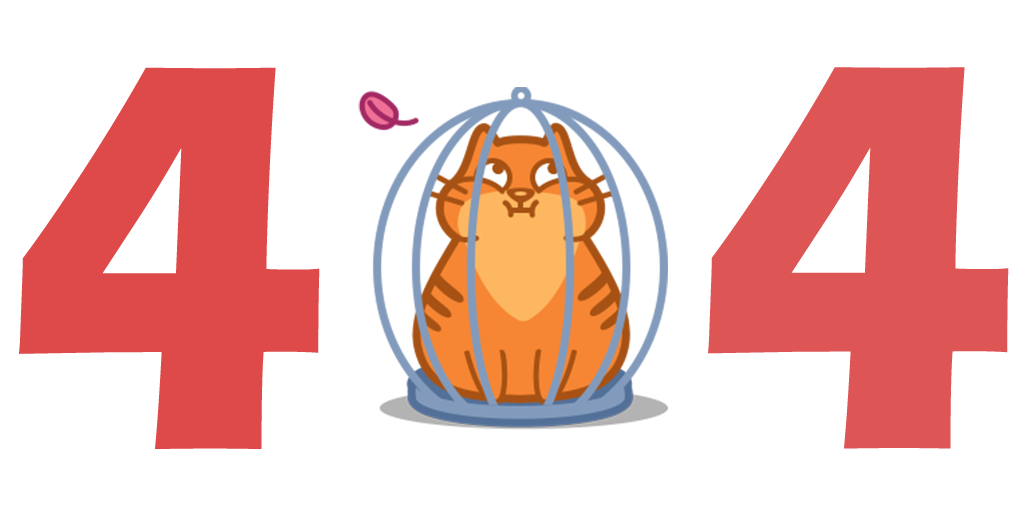
<style>
.page{position:relative;width:1024px;height:512px;background:#ffffff}
.page>*{position:absolute;margin:0}
.t1{font:572px "ErasITC-Bold";color:#de4a4a;scale:0.9 1}
.t2{font:571.9px "ErasITC-Bold";color:#de5555;scale:0.9 1}
</style>
<div class="page">
<p class="t1" style="left:19px;top:67px;width:301px;height:382px">4</p>
<p class="t2" style="left:708px;top:67px;width:301px;height:382px">4</p>
</div>
